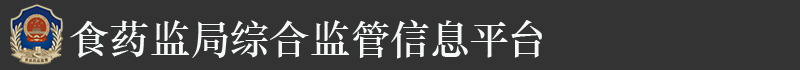
<style>
.page{position:relative;width:800px;height:70px;background:#333333}
.page>*{position:absolute;margin:0}
.t1{font:40px "STZhongsong";letter-spacing:0.05em;color:#f6f9f9}
</style>
<div class="page">
<p class="t1" style="left:70px;top:19px;width:472px;height:40px">食药监局综合监管信息平台</p>
</div>
